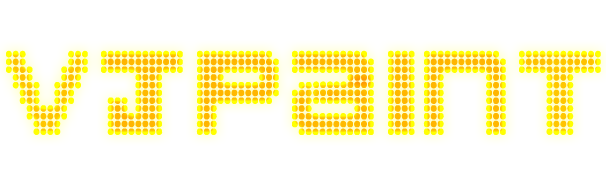
<style>
.page{position:relative;width:606px;height:179px;background:#ffffff}
.page>*{position:absolute;margin:0}
.t1{font:137.1px "Clubland";scale:0.89 1}
</style>
<div class="page">
<p class="t1" style="left:6px;top:50px;width:595px;height:86px">VJpaint</p>
</div>
